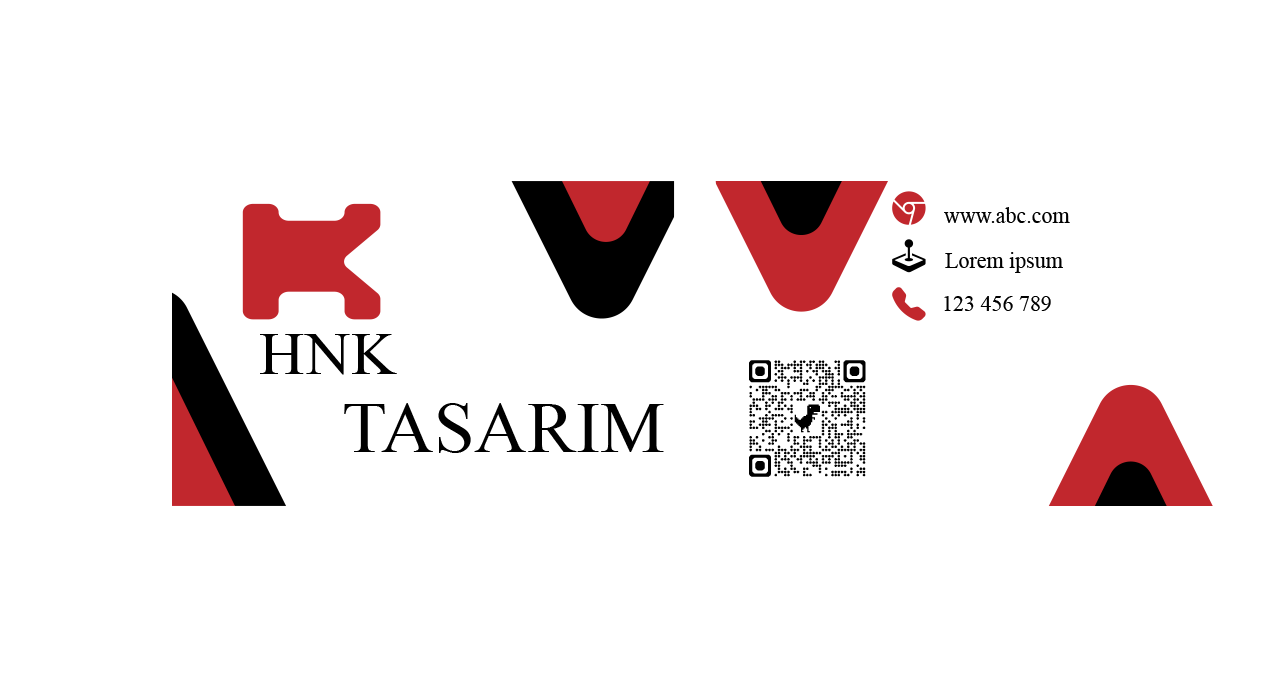
<style>
.page{position:relative;width:1287px;height:697px;background:#ffffff}
.page>*{position:absolute;margin:0}
.t1{font:22px "MyriadPro-Regular";color:#000000}
.t2{font:59.8px "MyriadPro-Regular";color:#000000;scale:1.06 1}
.t3{font:70.6px "MyriadPro-Regular";color:#000000;scale:1.03 1}
</style>
<div class="page">
<p class="t1" style="left:944px;top:207px;width:126px;height:16px">www.abc.com</p>
<p class="t1" style="left:945px;top:252px;width:118px;height:21px">Lorem ipsum</p>
<p class="t1" style="left:944px;top:296px;width:107px;height:15px">123 456 789</p>
<p class="t2" style="left:260px;top:334px;width:137px;height:41px">HNK</p>
<p class="t3" style="left:344px;top:403px;width:320px;height:50px">TASARIM</p>
</div>
